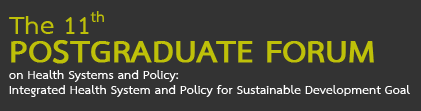
<style>
.page{position:relative;width:421px;height:111px;background:#333333}
.page>*{position:absolute;margin:0}
.t1{font:36px "THSarabunPSK-Bold";color:#bec009}
.t2{font:44.2px "THSarabunPSK-Bold";color:#bec009;font-weight:bold}
.t3{font:17.3px/15.3px "THSarabunPSK-Bold";color:#ffffff}
</style>
<div class="page">
<p class="t1" style="left:9px;top:11px;width:95px;height:23px">The 11th</p>
<p class="t2" style="left:11px;top:40px;width:363px;height:24px">POSTGRADUATE FORUM</p>
<p class="t3" style="left:9px;top:70px;width:401px;height:27px">on Health Systems and Policy: <br>Integrated Health System and Policy for Sustainable Development Goal</p>
</div>
